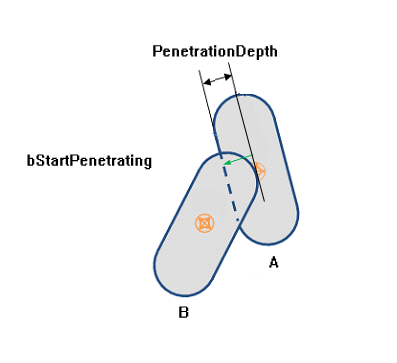
<style>
.page{position:relative;width:397px;height:363px;background:#ffffff}
.page>*{position:absolute;margin:0}
.t1{font:18px "System";color:#000100}
.t2{font:18px "System";color:#000000}
</style>
<div class="page">
<p class="t1" style="left:153px;top:45px;width:124px;height:15px">PenetrationDepth</p>
<p class="t2" style="left:27px;top:154px;width:125px;height:16px">bStartPenetrating</p>
<p class="t2" style="left:269px;top:256px;width:10px;height:12px">A</p>
<p class="t2" style="left:179px;top:306px;width:10px;height:12px">B</p>
</div>
